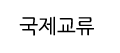
<style>
.page{position:relative;width:120px;height:53px;background:#ffffff}
.page>*{position:absolute;margin:0}
.t1{font:19.9px "NanumGothic";color:#000000}
</style>
<div class="page">
<p class="t1" style="left:19px;top:16px;width:75px;height:20px">국제교류</p>
</div>
